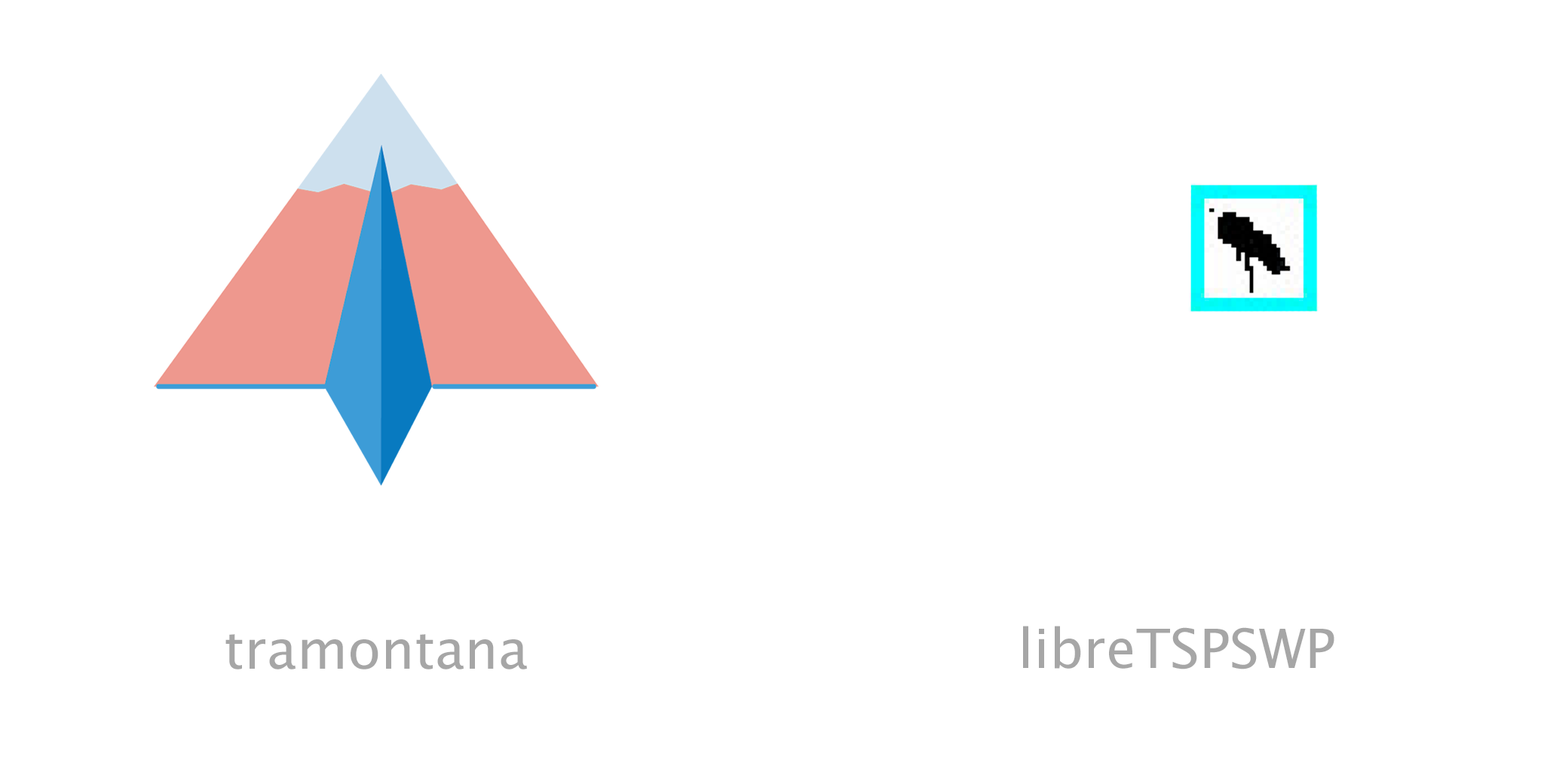
<style>
.page{position:relative;width:1544px;height:772px;background:#ffffff}
.page>*{position:absolute;margin:0}
.t1{font:54.3px "LucidaGrande";color:#a6a6a6}
</style>
<div class="page">
<p class="t1" style="left:1023px;top:626px;width:312px;height:44px">libreTSPSWP</p>
<p class="t1" style="left:225px;top:634px;width:302px;height:36px">tramontana</p>
</div>
